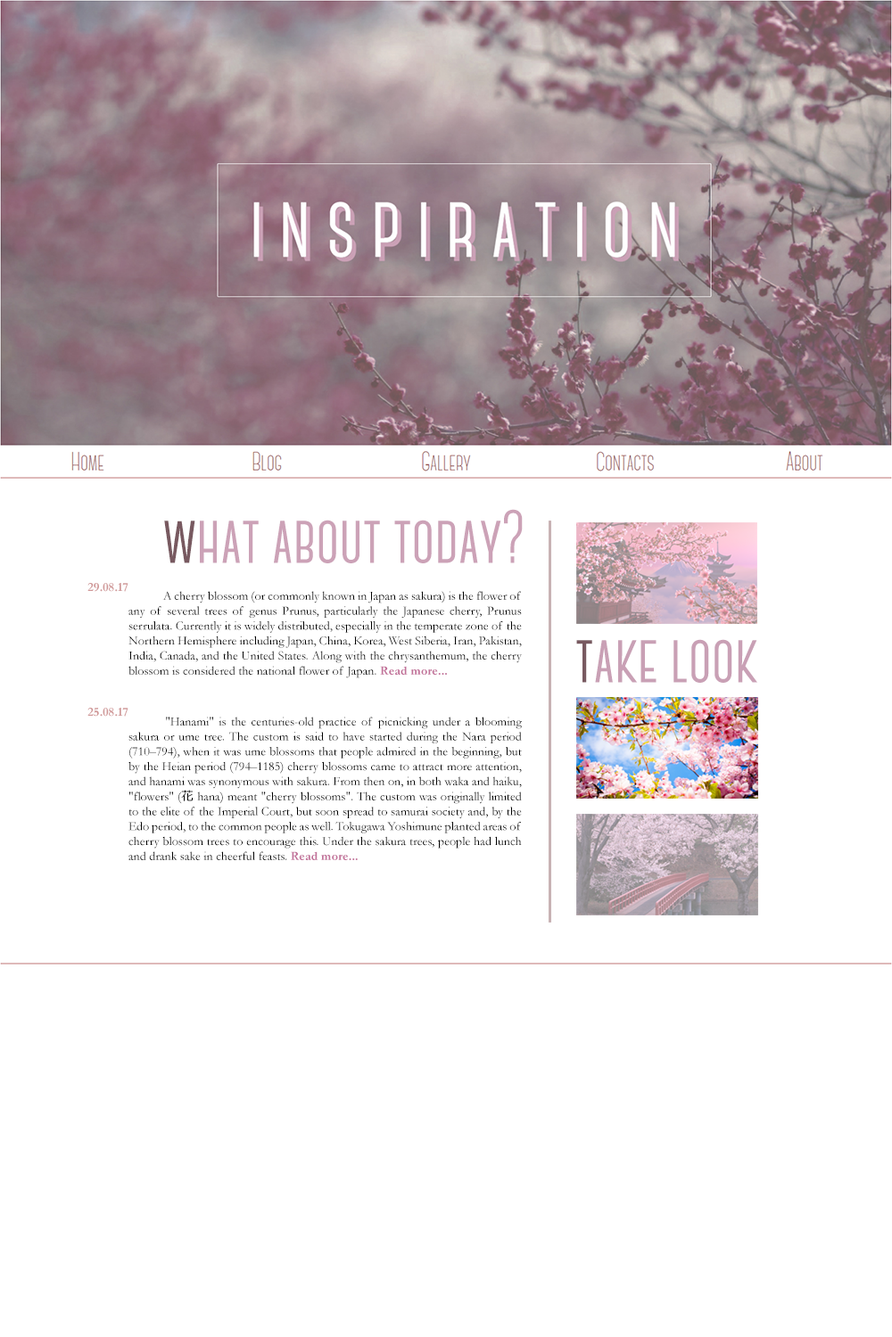
<style>
.page{position:relative;width:892px;height:1337px;background:#ffffff}
.page>*{position:absolute;margin:0}
.t1{font:75.3px "CanterBold";color:#cca2b7}
.t2{font:75.3px "CanterBold";color:#785960}
.t3{font:12.5px "Garamond-Bold";color:#d09898}
.t4{font:12.5px "Garamond";color:#000000}
.t5{font:20.1px "Garamond-Bold";color:#d09898}
.t6{font:12.5px "Garamond-Bold";color:#c2729a}
.t7{font:75.3px "CanterBold";color:#c9a0b5}
.t8{font:12.5px "Meiryo";color:#000000}
</style>
<div class="page">
<p class="t1" style="left:164px;top:509px;width:358px;height:54px"><span class="t2">w</span>hat about today?</p>
<p class="t3" style="left:87px;top:583px;width:41px;height:9px">29.08.17</p>
<p class="t4" style="left:128px;top:591px;width:394px;height:88px;text-align:justify"><span class="t5"> </span> A cherry blossom (or commonly known in Japan as sakura) is the flower of any of several trees of genus Prunus, particularly the Japanese cherry, Prunus serrulata. Currently it is widely distributed, especially in the temperate zone of the Northern Hemisphere including Japan, China, Korea, West Siberia, Iran, Pakistan, India, Canada, and the United States. Along with the chrysanthemum, the cherry blossom is considered the national flower of Japan. <span class="t6">Read more...</span></p>
<p class="t7" style="left:576px;top:639px;width:181px;height:44px"><span class="t2">t</span>ake look</p>
<p class="t3" style="left:87px;top:708px;width:41px;height:9px">25.08.17</p>
<p class="t4" style="left:128px;top:717px;width:394px;height:143px;text-align:justify"><span class="t5"> </span> "Hanami" is the centuries-old practice of picnicking under a blooming sakura or ume tree. The custom is said to have started during the Nara period (710–794), when it was ume blossoms that people admired in the beginning, but by the Heian period (794–1185) cherry blossoms came to attract more attention, and hanami was synonymous with sakura. From then on, in both waka and haiku, "flowers" (<span class="t8">花</span> hana) meant "cherry blossoms". The custom was originally limited to the elite of the Imperial Court, but soon spread to samurai society and, by the Edo period, to the common people as well. Tokugawa Yoshimune planted areas of cherry blossom trees to encourage this. Under the sakura trees, people had lunch and drank sake in cheerful feasts. <span class="t6">Read more...</span></p>
</div>
